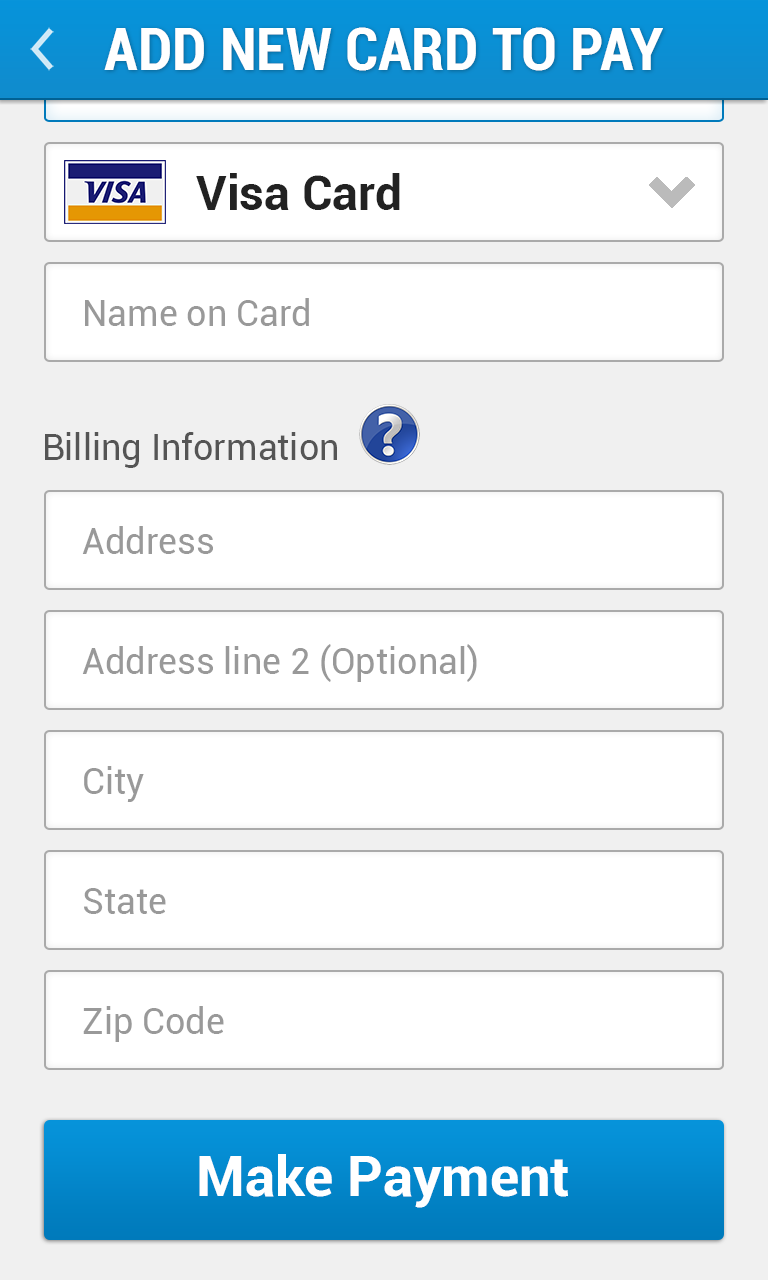
<style>
.page{position:relative;width:768px;height:1280px;background:#ffffff}
.page>*{position:absolute;margin:0}
.t1{font:60px "Roboto-BoldCondensed";color:#ffffff}
.t2{font:48px "Roboto-Bold";color:#222222}
.t3{font:36px "Roboto-Regular";color:#999999}
.t4{font:36px "Roboto-Regular";color:#555555}
.t5{font:56px "Roboto-Bold";color:#ffffff}
</style>
<div class="page">
<p class="t1" style="left:104px;top:27px;width:559px;height:44px">ADD NEW CARD TO PAY</p>
<p class="t2" style="left:196px;top:173px;width:204px;height:37px">Visa Card</p>
<p class="t3" style="left:85px;top:298px;width:224px;height:28px">Name on Card</p>
<p class="t4" style="left:45px;top:432px;width:292px;height:36px">Billing Information</p>
<p class="t3" style="left:82px;top:526px;width:131px;height:28px">Address</p>
<p class="t3" style="left:82px;top:644px;width:395px;height:38px">Address line 2 (Optional)</p>
<p class="t3" style="left:84px;top:766px;width:60px;height:36px">City</p>
<p class="t3" style="left:84px;top:888px;width:82px;height:26px">State</p>
<p class="t3" style="left:83px;top:1006px;width:141px;height:36px">Zip Code</p>
<p class="t5" style="left:199px;top:1154px;width:369px;height:54px">Make Payment</p>
</div>
